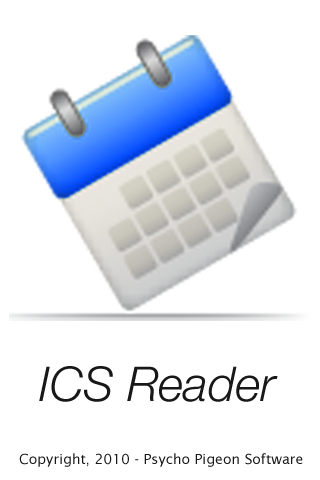
<style>
.page{position:relative;width:320px;height:480px;background:#ffffff}
.page>*{position:absolute;margin:0}
.t1{font:48px "HelveticaNeue-LightItalic";color:#181818}
.t2{font:14px "LucidaSans";color:#181818}
</style>
<div class="page">
<p class="t1" style="left:39px;top:366px;width:239px;height:36px">ICS Reader</p>
<p class="t2" style="left:19px;top:453px;width:284px;height:14px">Copyright, 2010 - Psycho Pigeon Software</p>
</div>
